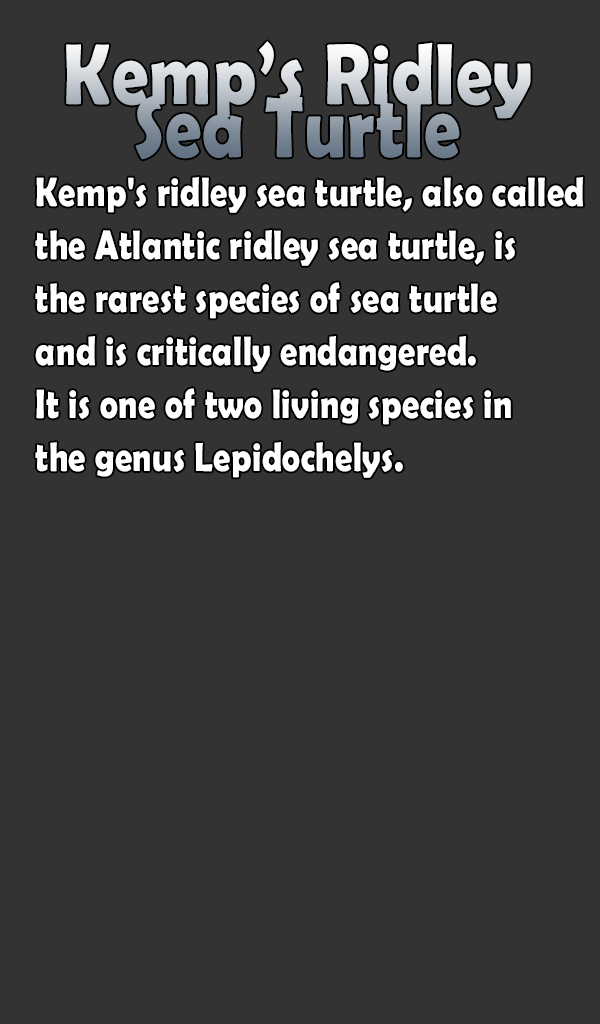
<style>
.page{position:relative;width:600px;height:1024px;background:#333333}
.page>*{position:absolute;margin:0}
.t1{font:87.1px/53px "BerlinSansFBDemi-Bold";letter-spacing:0.015em;scale:0.83 1}
.t2{font:41.1px/53px "BerlinSansFBDemi-Bold";letter-spacing:0.015em;color:#ffffff;scale:0.83 1}
</style>
<div class="page">
<p class="t1" style="left:66px;top:41px;width:465px;height:119px;text-align:center">Kemp’s Ridley<br>Sea Turtle</p>
<p class="t2" style="left:35px;top:177px;width:548px;height:301px">Kemp's ridley sea turtle, also called <br>the Atlantic ridley sea turtle, is <br>the rarest species of sea turtle <br>and is critically endangered. <br>It is one of two living species in <br>the genus Lepidochelys.</p>
</div>
